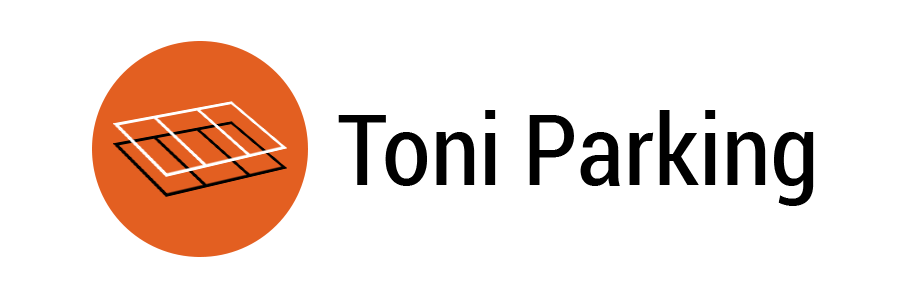
<style>
.page{position:relative;width:903px;height:298px;background:#ffffff}
.page>*{position:absolute;margin:0}
.t1{font:98.7px "Roboto-Condensed";color:#000000}
</style>
<div class="page">
<p class="t1" style="left:338px;top:110px;width:476px;height:96px">Toni Parking</p>
</div>
